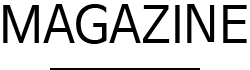
<style>
.page{position:relative;width:250px;height:70px;background:#ffffff}
.page>*{position:absolute;margin:0}
.t1{font:50px "NanumBarunGothic";color:#000000}
</style>
<div class="page">
<p class="t1" style="left:3px;top:4px;width:244px;height:40px">MAGAZINE</p>
</div>
